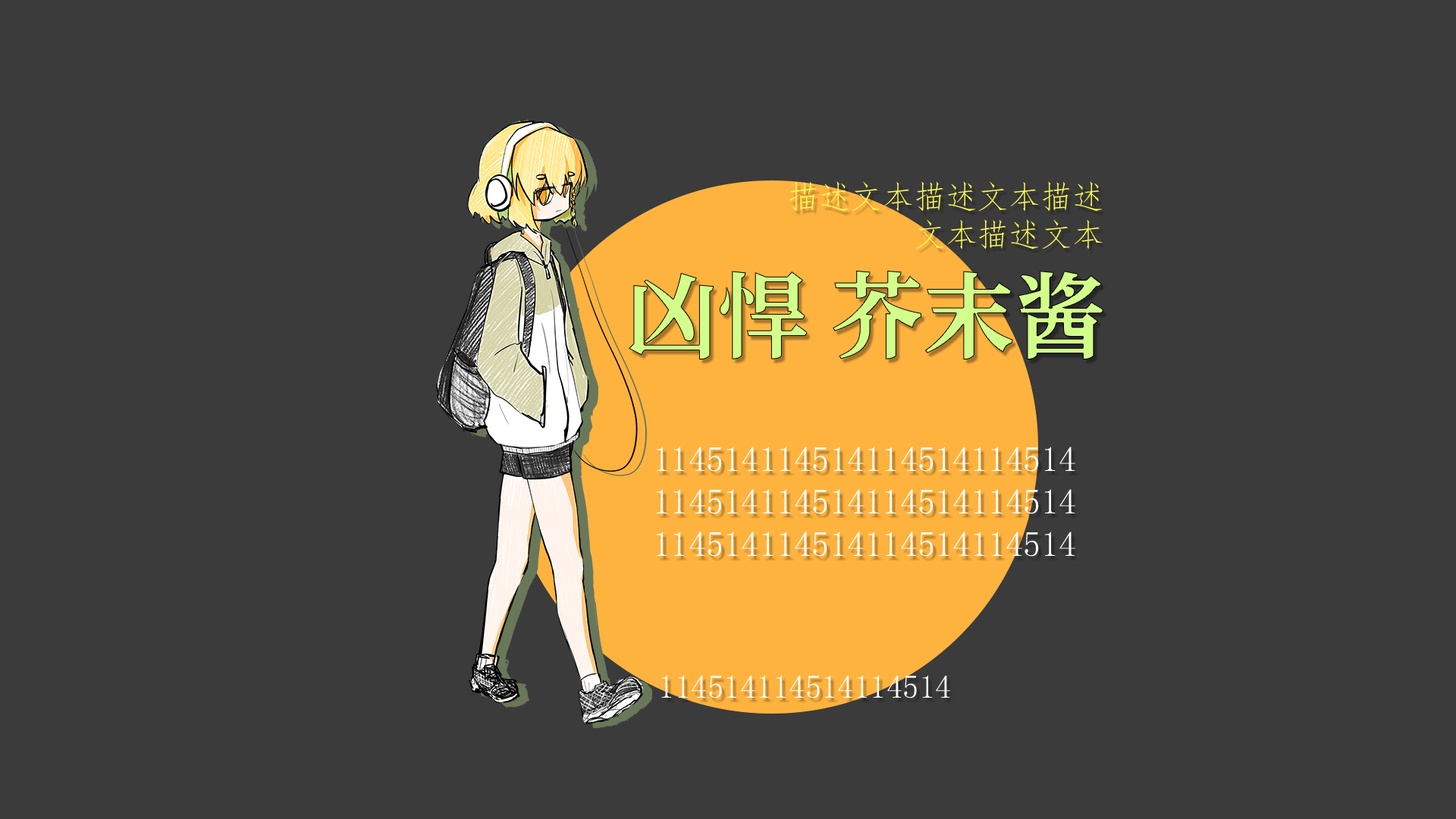
<style>
.page{position:relative;width:1456px;height:819px;background:#3b3b3b}
.page>*{position:absolute;margin:0}
.t1{font:31.7px "FangSong";color:#fffd57}
.t2{font:93.6px "KTXP-Kaguya-Serif-Bold";color:#d2ff8b}
.t3{font:35.3px "FangSong";color:#fffdff}
.t4{font:32.6px "FangSong";color:#fffdff}
</style>
<div class="page">
<p class="t1" style="left:789px;top:181px;width:314px;height:68px;text-align:right">描述文本描述文本描述<br>文本描述文本</p>
<p class="t2" style="left:629px;top:270px;width:475px;height:89px">凶悍 芥末酱</p>
<p class="t3" style="left:657px;top:447px;width:418px;height:110px">114514114514114514114514<br>114514114514114514114514<br>114514114514114514114514</p>
<p class="t4" style="left:661px;top:675px;width:289px;height:23px">114514114514114514</p>
</div>
